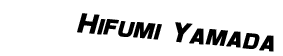
<style>
.page{position:relative;width:283px;height:56px;background:#ffffff}
.page>*{position:absolute;margin:0}
.t1{font:28px "Maximus";color:#000000;font-weight:bold;font-style:italic}
</style>
<div class="page">
<p class="t1" style="left:77px;top:13px;width:197px;height:39px;rotate:6deg">Hifumi Yamada</p>
</div>
